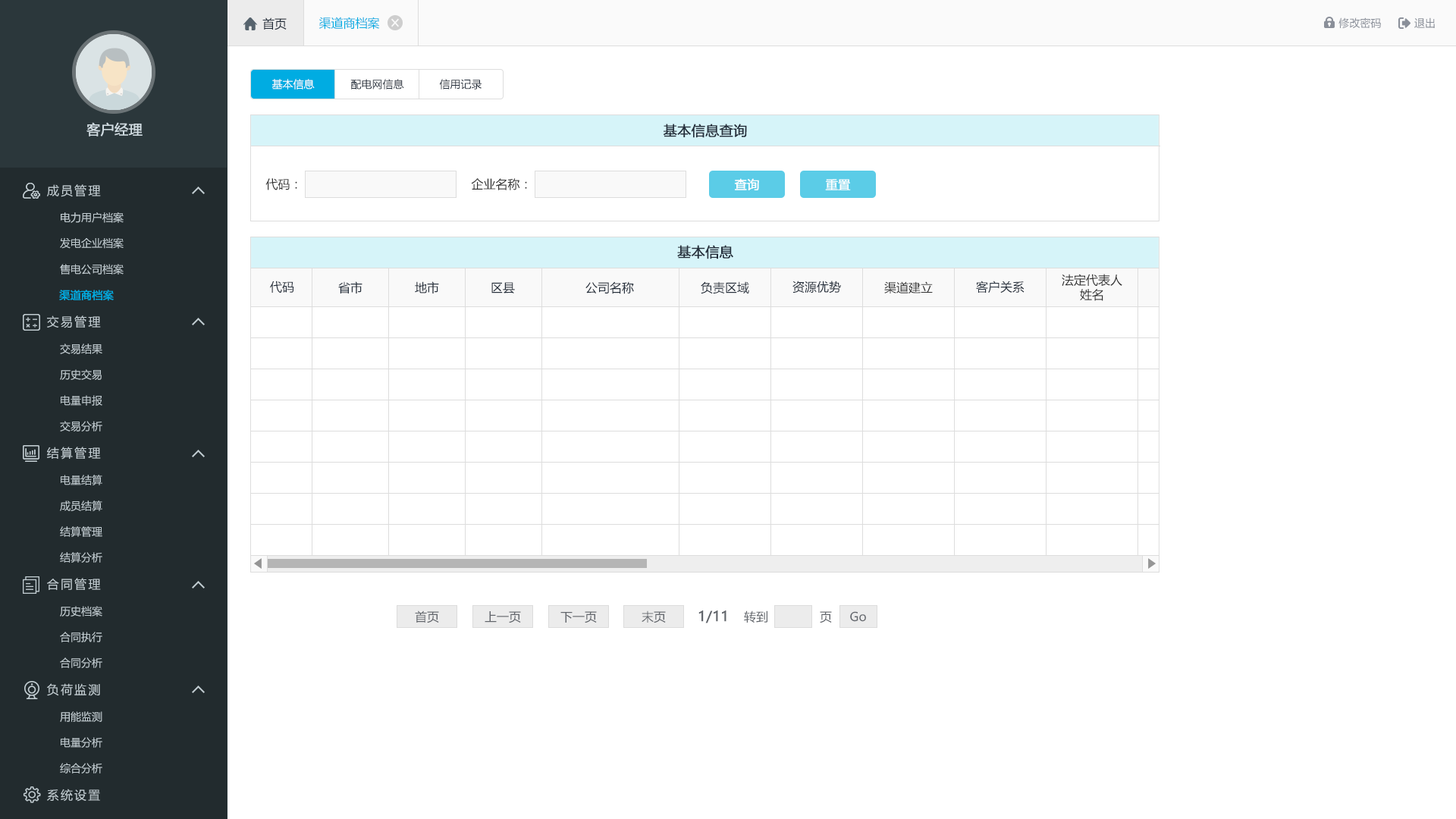
<style>
.page{position:relative;width:1456px;height:819px;background:#ffffff}
.page>*{position:absolute;margin:0}
.t1{font:12.1px "MicrosoftYaHei";color:#242e3b}
.t2{font:12.1px "MicrosoftYaHei";color:#00ace2}
.t3{font:10.6px "MicrosoftYaHei";color:#8a8f99}
.t4{font:10.6px "MicrosoftYaHei";color:#ffffff}
.t5{font:10.6px "MicrosoftYaHei";color:#242e3b}
.t6{font:13.6px "MicrosoftYaHei";color:#d1dce2;font-weight:bold}
.t7{font:13.6px "MicrosoftYaHei";color:#242e3b;font-weight:bold}
.t8{font:12.1px "MicrosoftYaHei";letter-spacing:0.14em;color:#c2cdd2}
.t9{font:12.1px "MicrosoftYaHei";color:#333333}
.t10{font:12.1px "MicrosoftYaHei";color:#ffffff;font-weight:bold}
.t11{font:10.6px "MicrosoftYaHei";color:#c2cdd2}
.t12{font:10.6px "MicrosoftYaHei";color:#00ace2;font-weight:bold}
.t13{font:12.1px "MicrosoftYaHei";color:#61656b}
.t14{font:13.6px "MicrosoftYaHei";color:#61656b;font-weight:bold}
</style>
<div class="page">
<p class="t1" style="left:262px;top:17px;width:25px;height:13px">首页</p>
<p class="t2" style="left:318px;top:17px;width:62px;height:13px">渠道商档案</p>
<p class="t3" style="left:1338px;top:17px;width:43px;height:12px">修改密码</p>
<p class="t3" style="left:1414px;top:17px;width:21px;height:11px">退出</p>
<p class="t4" style="left:271px;top:79px;width:44px;height:10px">基本信息</p>
<p class="t5" style="left:350px;top:79px;width:54px;height:10px">配电网信息</p>
<p class="t5" style="left:439px;top:79px;width:43px;height:10px">信用记录</p>
<p class="t6" style="left:86px;top:122px;width:57px;height:14px">客户经理</p>
<p class="t7" style="left:663px;top:124px;width:84px;height:14px">基本信息查询</p>
<p class="t8" style="left:47px;top:184px;width:54px;height:13px">成员管理</p>
<p class="t9" style="left:265px;top:178px;width:32px;height:12px">代码：</p>
<p class="t9" style="left:471px;top:178px;width:56px;height:12px">企业名称：</p>
<p class="t10" style="left:734px;top:178px;width:25px;height:12px">查询</p>
<p class="t10" style="left:825px;top:179px;width:26px;height:11px">重置</p>
<p class="t11" style="left:61px;top:212px;width:63px;height:11px">电力用户档案</p>
<p class="t11" style="left:60px;top:237px;width:64px;height:12px">发电企业档案</p>
<p class="t7" style="left:677px;top:245px;width:56px;height:14px">基本信息</p>
<p class="t11" style="left:60px;top:264px;width:64px;height:11px">售电公司档案</p>
<p class="t1" style="left:270px;top:281px;width:24px;height:12px">代码</p>
<p class="t1" style="left:338px;top:281px;width:24px;height:12px">省市</p>
<p class="t1" style="left:415px;top:281px;width:24px;height:12px">地市</p>
<p class="t1" style="left:585px;top:281px;width:49px;height:13px">公司名称</p>
<p class="t1" style="left:701px;top:281px;width:48px;height:13px">负责区域</p>
<p class="t1" style="left:792px;top:281px;width:49px;height:12px">资源优势</p>
<p class="t9" style="left:884px;top:281px;width:49px;height:12px">渠道建立</p>
<p class="t1" style="left:976px;top:281px;width:48px;height:12px">客户关系</p>
<p class="t9" style="left:1062px;top:274px;width:60px;height:27px;text-align:center">法定代表人<br>姓名</p>
<p class="t12" style="left:59px;top:290px;width:55px;height:11px">渠道商档案</p>
<p class="t1" style="left:491px;top:282px;width:24px;height:11px">区县</p>
<p class="t8" style="left:47px;top:315px;width:54px;height:13px">交易管理</p>
<p class="t11" style="left:60px;top:344px;width:42px;height:10px">交易结果</p>
<p class="t11" style="left:60px;top:369px;width:42px;height:11px">历史交易</p>
<p class="t11" style="left:61px;top:395px;width:41px;height:11px">电量申报</p>
<p class="t11" style="left:60px;top:421px;width:42px;height:10px">交易分析</p>
<p class="t8" style="left:47px;top:447px;width:54px;height:13px">结算管理</p>
<p class="t11" style="left:61px;top:475px;width:41px;height:10px">电量结算</p>
<p class="t11" style="left:60px;top:500px;width:42px;height:11px">成员结算</p>
<p class="t11" style="left:60px;top:526px;width:42px;height:11px">结算管理</p>
<p class="t11" style="left:60px;top:552px;width:42px;height:11px">结算分析</p>
<p class="t8" style="left:47px;top:578px;width:54px;height:12px">合同管理</p>
<p class="t11" style="left:60px;top:606px;width:42px;height:11px">历史档案</p>
<p class="t13" style="left:415px;top:610px;width:24px;height:13px">首页</p>
<p class="t13" style="left:485px;top:611px;width:36px;height:12px">上一页</p>
<p class="t13" style="left:560px;top:611px;width:37px;height:12px">下一页</p>
<p class="t13" style="left:642px;top:610px;width:24px;height:13px">末页</p>
<p class="t14" style="left:698px;top:610px;width:28px;height:13px">1/11</p>
<p class="t13" style="left:744px;top:610px;width:23px;height:13px">转到</p>
<p class="t13" style="left:820px;top:611px;width:12px;height:12px">页</p>
<p class="t13" style="left:850px;top:611px;width:16px;height:11px">Go</p>
<p class="t11" style="left:60px;top:632px;width:42px;height:10px">合同执行</p>
<p class="t11" style="left:60px;top:657px;width:42px;height:11px">合同分析</p>
<p class="t8" style="left:47px;top:683px;width:53px;height:13px">负荷监测</p>
<p class="t11" style="left:60px;top:711px;width:42px;height:11px">用能监测</p>
<p class="t11" style="left:61px;top:737px;width:41px;height:11px">电量分析</p>
<p class="t11" style="left:60px;top:763px;width:42px;height:10px">综合分析</p>
<p class="t8" style="left:47px;top:789px;width:53px;height:13px">系统设置</p>
</div>
